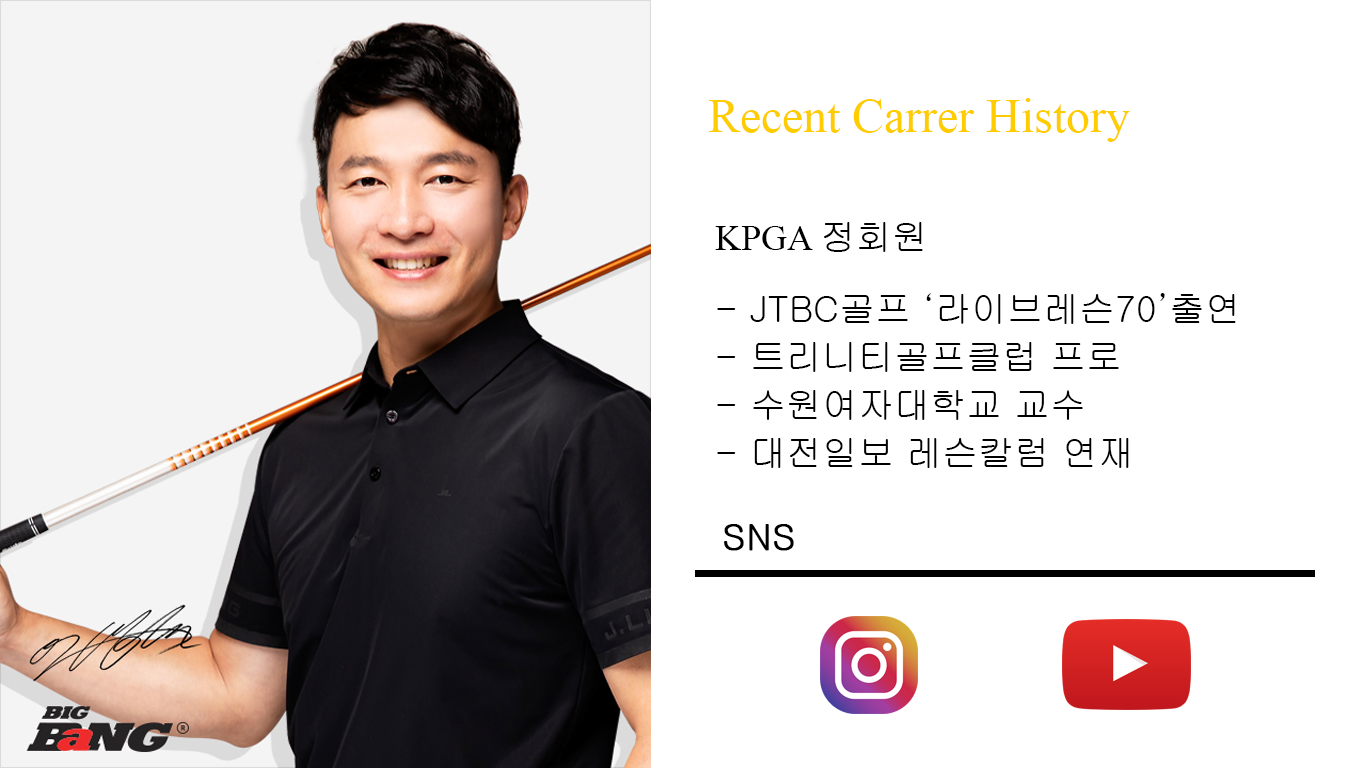
<style>
.page{position:relative;width:1366px;height:768px;background:#ffffff}
.page>*{position:absolute;margin:0}
.t1{font:48px "TimesNewRomanPSMT";color:#ffcc00}
.t2{font:36px/24px "Gulim";color:#000000}
.t3{font:36px/24px "TimesNewRomanPSMT";color:#000000}
.t4{font:36px "Gulim";color:#000000;font-weight:bold}
</style>
<div class="page">
<p class="t1" style="left:708px;top:98px;width:422px;height:44px">Recent Carrer History</p>
<p class="t2" style="left:715px;top:222px;width:521px;height:246px"><span class="t3">KPGA </span>정회원<br><br><br>- JTBC골프 ‘라이브레슨70’출연<br><br>- 트리니티골프클럽 프로<br><br>- 수원여자대학교 교수<br><br>- 대전일보 레슨칼럼 연재</p>
<p class="t4" style="left:724px;top:524px;width:70px;height:27px">SNS</p>
</div>
